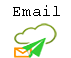
<style>
.page{position:relative;width:71px;height:58px;background:#ffffff}
.page>*{position:absolute;margin:0}
.t1{font:12px "CourierNewPSMT";color:#000000}
</style>
<div class="page">
<p class="t1" style="left:13px;top:5px;width:47px;height:11px">Email</p>
</div>
